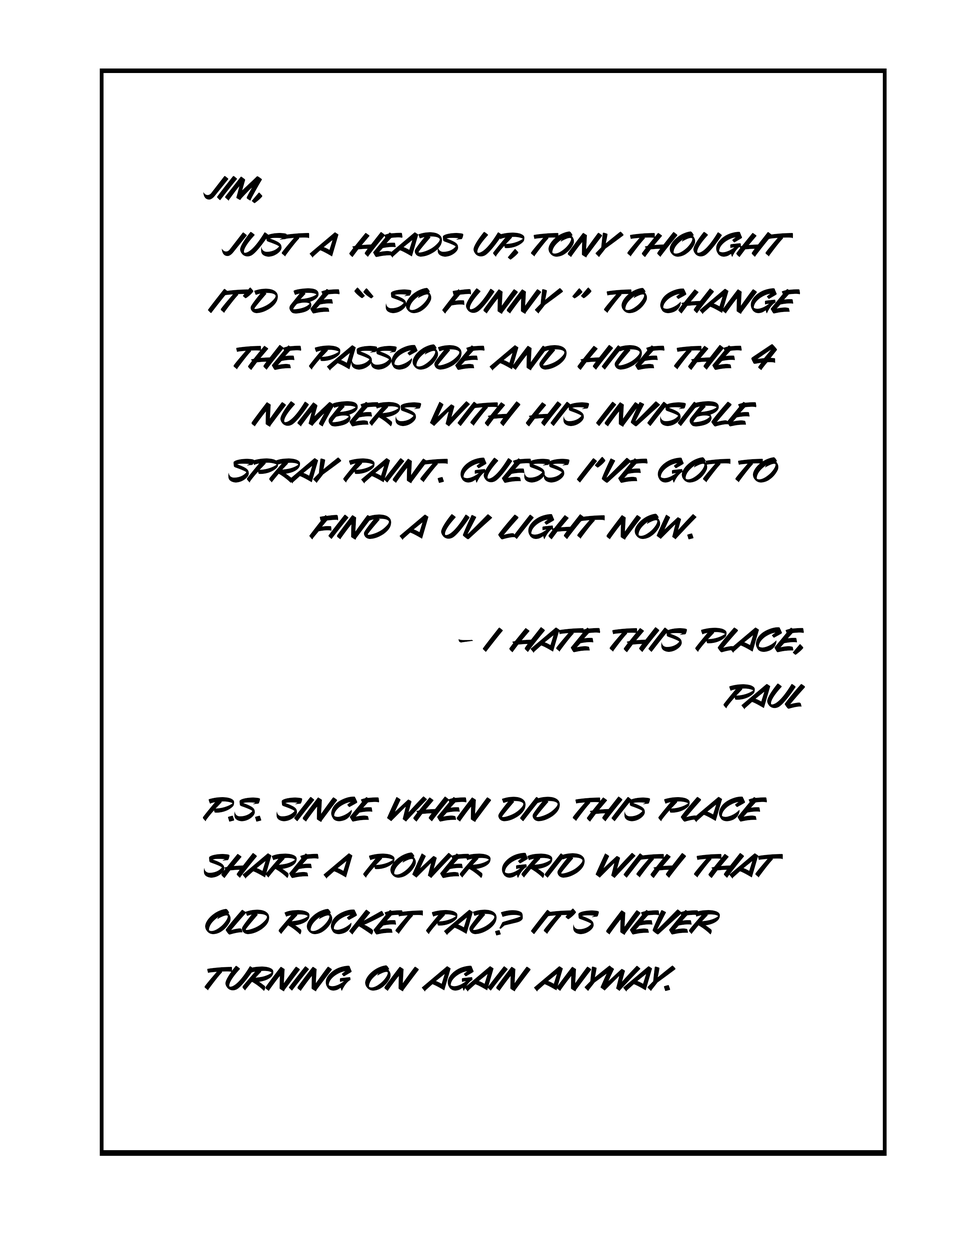
<style>
.page{position:relative;width:960px;height:1242px;background:#ffffff}
.page>*{position:absolute;margin:0}
.t1{font:47.1px "Avalanche-Regular";color:#000000}
</style>
<div class="page">
<p class="t1" style="left:203px;top:176px;width:602px;height:816px">Jim, <br>Just a heads up, Tony thought it’d be “ So funny ” to change the passcode and hide the 4 numbers with his invisible spray paint. Guess I’ve got to find a UV light now.<br><br>- I hate this place, <br>Paul<br><br>P.s. Since when did this place share a power grid with that old rocket pad? it’s never turning on again anyway.</p>
</div>
